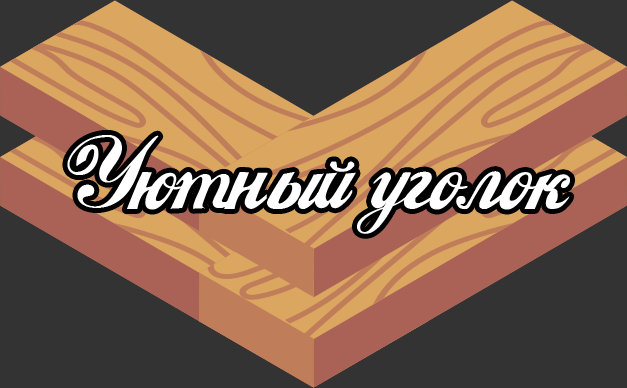
<style>
.page{position:relative;width:627px;height:388px;background:#333333}
.page>*{position:absolute;margin:0}
.t1{font:93.3px "Coca-ColaRegularrus-lat";color:#ffffff}
</style>
<div class="page">
<p class="t1" style="left:67px;top:135px;width:503px;height:99px">Уютный уголок</p>
</div>
